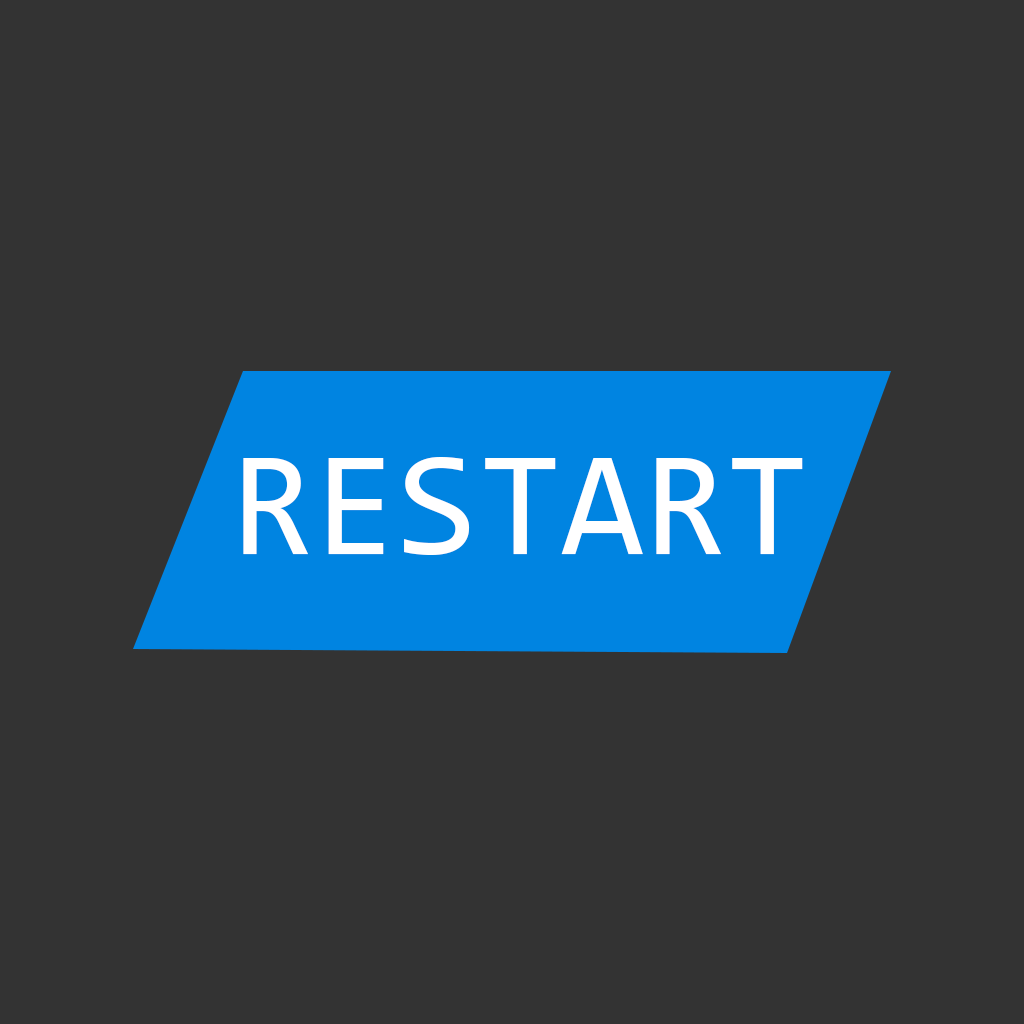
<style>
.page{position:relative;width:1024px;height:1024px;background:#333333}
.page>*{position:absolute;margin:0}
.t1{font:150px "Consolas";color:#ffffff}
</style>
<div class="page">
<p class="t1" style="left:243px;top:457px;width:560px;height:98px">RESTART</p>
</div>
